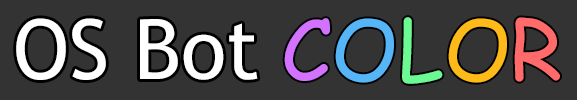
<style>
.page{position:relative;width:577px;height:100px;background:#333333}
.page>*{position:absolute;margin:0}
.t1{font:83.3px "ComicSansMS";color:#d272ff}
.t2{font:83.3px "ComicSansMS";color:#56b5f7}
.t3{font:83.3px "ComicSansMS";color:#6cf994}
.t4{font:83.3px "ComicSansMS";color:#fdba18}
.t5{font:83.3px "ComicSansMS";color:#ff6a6a}
.t6{font:83.3px "TrebuchetMS";color:#ffffff}
</style>
<div class="page">
<p class="t1" style="left:284px;top:17px;width:276px;height:67px">C<span class="t2">O</span><span class="t3">L</span><span class="t4">O</span><span class="t5">R</span></p>
<p class="t6" style="left:16px;top:18px;width:242px;height:62px">OS Bot</p>
</div>
